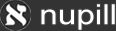
<style>
.page{position:relative;width:116px;height:31px;background:#333333}
.page>*{position:absolute;margin:0}
.t1{font:27.7px "ArialMT";color:#ffffff;scale:1.2 1}
</style>
<div class="page">
<p class="t1" style="left:41px;top:4px;width:74px;height:26px">nupill</p>
</div>
